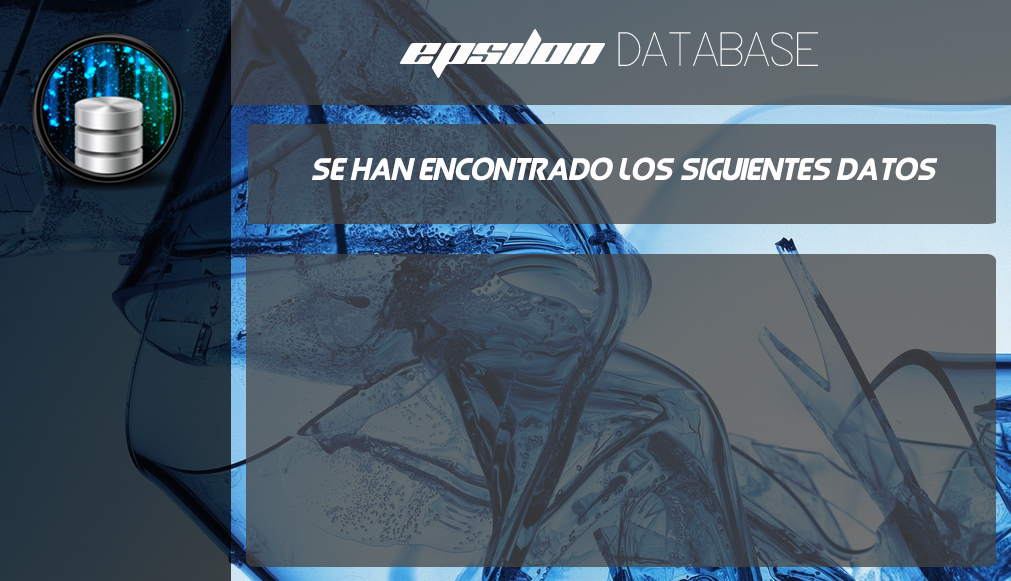
<style>
.page{position:relative;width:1011px;height:581px}
.page>*{position:absolute;margin:0}
.t1{font:32px "QueenofCamelot-Italic";color:#fefefe}
</style>
<div class="page">
<p class="t1" style="left:312px;top:157px;width:626px;height:24px">Se han encontrado los siguientes datos</p>
</div>
